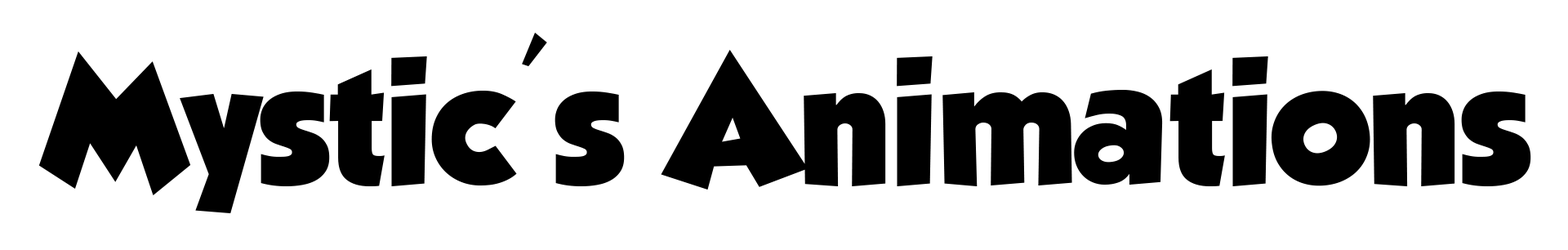
<style>
.page{position:relative;width:1568px;height:250px;background:#ffffff}
.page>*{position:absolute;margin:0}
.t1{font:154.4px "GROBOLD";color:#000000}
</style>
<div class="page">
<p class="t1" style="left:38px;top:33px;width:1493px;height:180px">Mystic's Animations</p>
</div>
